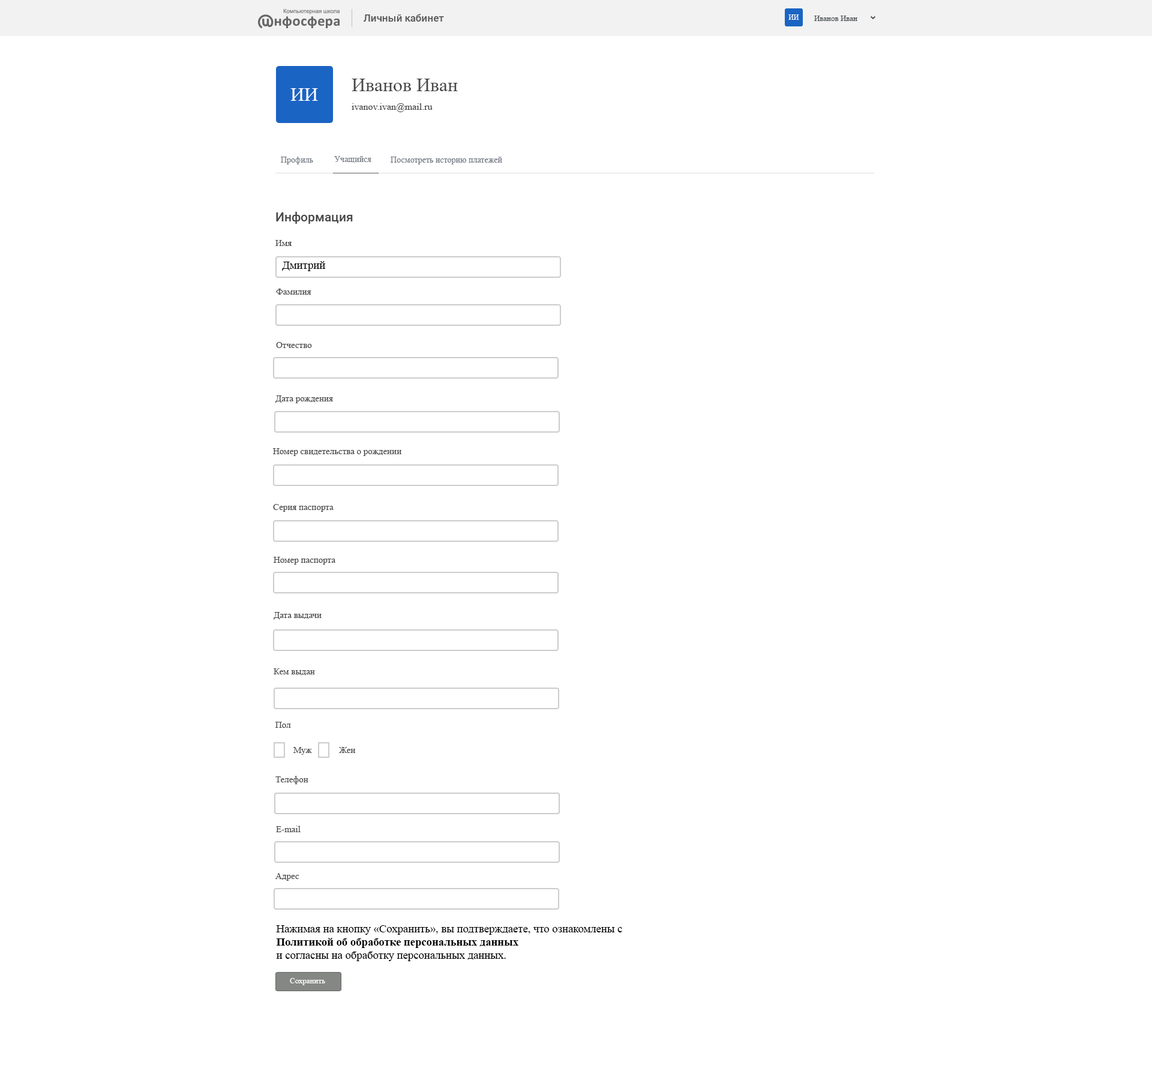
<style>
.page{position:relative;width:1152px;height:1080px;background:#ffffff}
.page>*{position:absolute;margin:0}
.t1{font:10.2px "Roboto-Medium";color:#585858}
.t2{font:7.2px "TimesNewRomanPSMT";color:#ffffff}
.t3{font:7.8px "TimesNewRomanPSMT";color:#464d50}
.t4{font:19.2px "TimesNewRomanPSMT";color:#ffffff}
.t5{font:19.2px "TimesNewRomanPSMT";color:#484848}
.t6{font:9.6px "TimesNewRomanPSMT";color:#484848}
.t7{font:8.4px "TimesNewRomanPSMT";color:#727a84}
.t8{font:12.6px "Roboto-Medium";color:#484848}
.t9{font:9px "TimesNewRomanPSMT";color:#484848}
.t10{font:11.2px "TimesNewRomanPSMT";color:#000000}
.t11{font:11.2px "TimesNewRomanPS-BoldMT";color:#000000}
.t12{font:7.8px "TimesNewRomanPSMT";color:#ffffff}
</style>
<div class="page">
<p class="t1" style="left:364px;top:14px;width:80px;height:8px">Личный кабинет</p>
<p class="t2" style="left:788px;top:14px;width:11px;height:6px">ИИ</p>
<p class="t3" style="left:814px;top:16px;width:43px;height:5px">Иванов Иван</p>
<p class="t4" style="left:290px;top:88px;width:28px;height:13px">ИИ</p>
<p class="t5" style="left:352px;top:79px;width:106px;height:12px">Иванов Иван</p>
<p class="t6" style="left:352px;top:103px;width:81px;height:9px">ivanov.ivan@mail.ru</p>
<p class="t7" style="left:281px;top:157px;width:32px;height:7px">Профиль</p>
<p class="t7" style="left:334px;top:156px;width:37px;height:7px">Учащийся</p>
<p class="t7" style="left:391px;top:157px;width:111px;height:7px">Посмотреть историю платежей</p>
<p class="t8" style="left:276px;top:212px;width:77px;height:12px">Информация</p>
<p class="t9" style="left:275px;top:240px;width:17px;height:6px">Имя</p>
<p class="t10" style="left:282px;top:261px;width:44px;height:10px">Дмитрий</p>
<p class="t9" style="left:276px;top:289px;width:35px;height:6px">Фамилия</p>
<p class="t9" style="left:276px;top:342px;width:36px;height:6px">Отчество</p>
<p class="t9" style="left:275px;top:395px;width:58px;height:8px">Дата рождения</p>
<p class="t9" style="left:273px;top:448px;width:128px;height:8px">Номер свидетельства о рождении</p>
<p class="t9" style="left:273px;top:504px;width:61px;height:8px">Серия паспорта</p>
<p class="t9" style="left:274px;top:557px;width:62px;height:8px">Номер паспорта</p>
<p class="t9" style="left:274px;top:612px;width:48px;height:8px">Дата выдачи</p>
<p class="t9" style="left:274px;top:668px;width:41px;height:8px">Кем выдан</p>
<p class="t9" style="left:275px;top:722px;width:16px;height:6px">Пол</p>
<p class="t9" style="left:293px;top:747px;width:19px;height:8px">Муж</p>
<p class="t9" style="left:339px;top:747px;width:16px;height:6px">Жен</p>
<p class="t9" style="left:275px;top:776px;width:33px;height:8px">Телефон</p>
<p class="t9" style="left:276px;top:826px;width:25px;height:6px">E-mail</p>
<p class="t9" style="left:275px;top:873px;width:24px;height:8px">Адрес</p>
<p class="t10" style="left:276px;top:925px;width:346px;height:36px">Нажимая на кнопку «Сохранить», вы подтверждаете, что ознакомлены с <br><span class="t11">Политикой об обработке персональных данных <br></span>и согласны на обработку персональных данных.</p>
<p class="t12" style="left:290px;top:978px;width:35px;height:7px">Сохранить</p>
</div>
